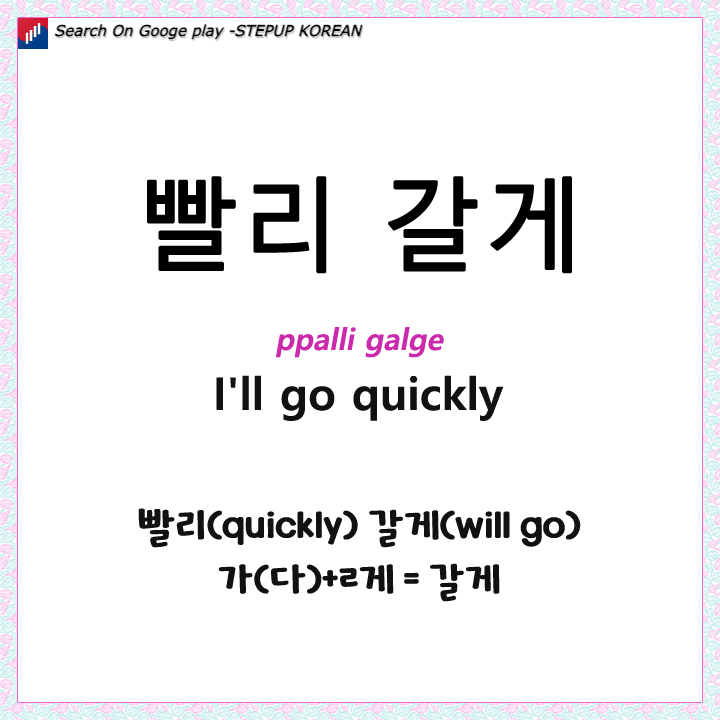
<style>
.page{position:relative;width:720px;height:720px;background:#ffffff}
.page>*{position:absolute;margin:0}
.t1{font:100px "MalgunGothic";color:#000000;font-weight:bold}
.t2{font:30px "MalgunGothicBold";color:#cc2aac;font-style:italic}
.t3{font:45px "MalgunGothicBold";color:#111111}
.t4{font:45px "KOTRA-HOPE";color:#111111}
</style>
<div class="page">
<p class="t1" style="left:147px;top:176px;width:425px;height:98px">빨리 갈게</p>
<p class="t2" style="left:276px;top:327px;width:168px;height:31px">ppalli galge</p>
<p class="t3" style="left:216px;top:375px;width:288px;height:46px">I'll go quickly</p>
<p class="t4" style="left:138px;top:508px;width:443px;height:94px;text-align:center">빨리(quickly) 갈게(will go)<br>가(다)+ㄹ게 = 갈게</p>
</div>
